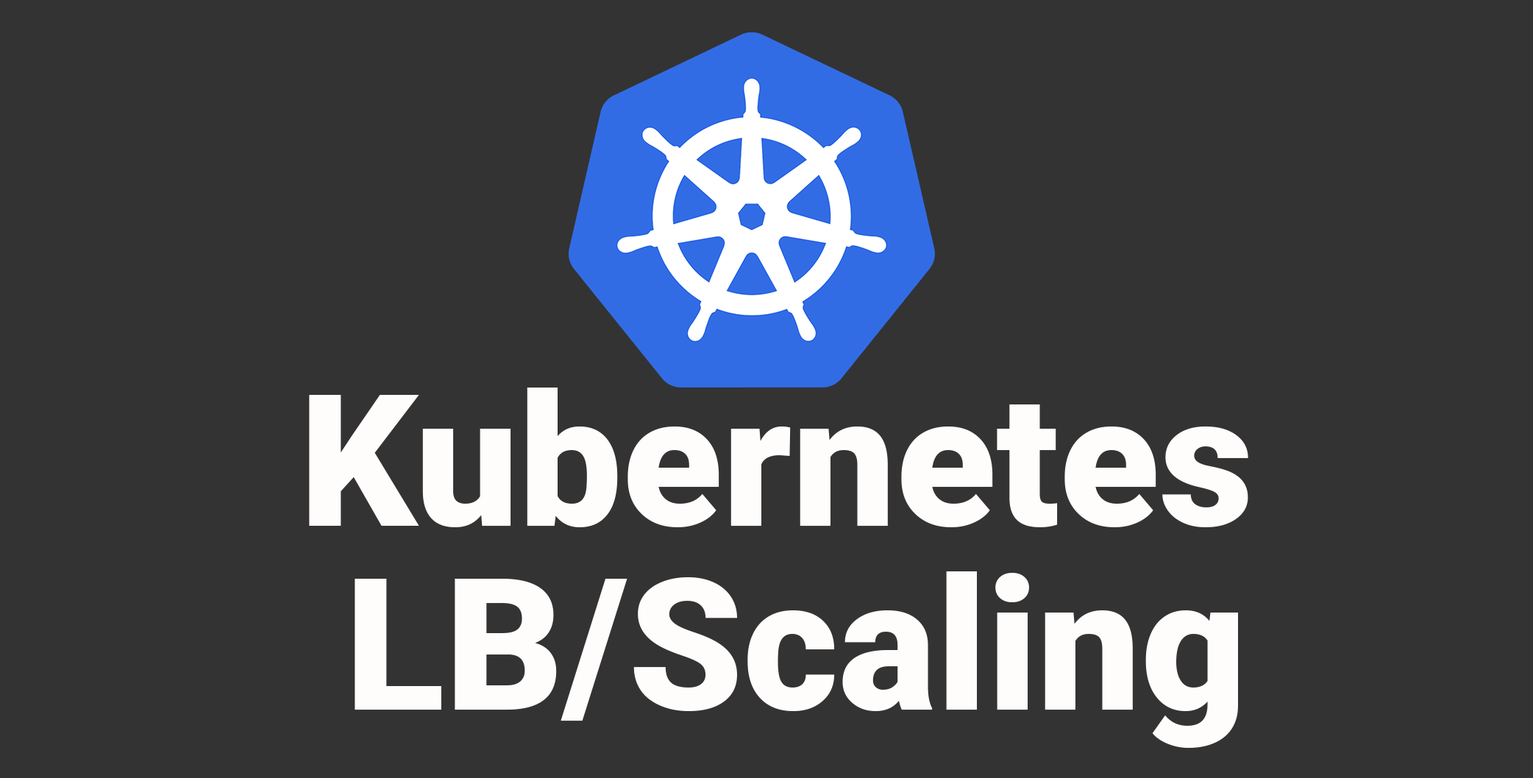
<style>
.page{position:relative;width:1533px;height:778px;background:#333333}
.page>*{position:absolute;margin:0}
.t1{font:183.9px/183.9px "Roboto-Black";color:#fffcfc}
</style>
<div class="page">
<p class="t1" style="left:309px;top:388px;width:939px;height:360px">Kubernetes<br> LB/Scaling</p>
</div>
